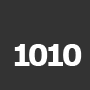
<style>
.page{position:relative;width:90px;height:90px;background:#333333}
.page>*{position:absolute;margin:0}
.t1{font:30px "Verdana-Bold";letter-spacing:-0.15em;color:#ffffff}
</style>
<div class="page">
<p class="t1" style="left:14px;top:44px;width:68px;height:22px">1010</p>
</div>
